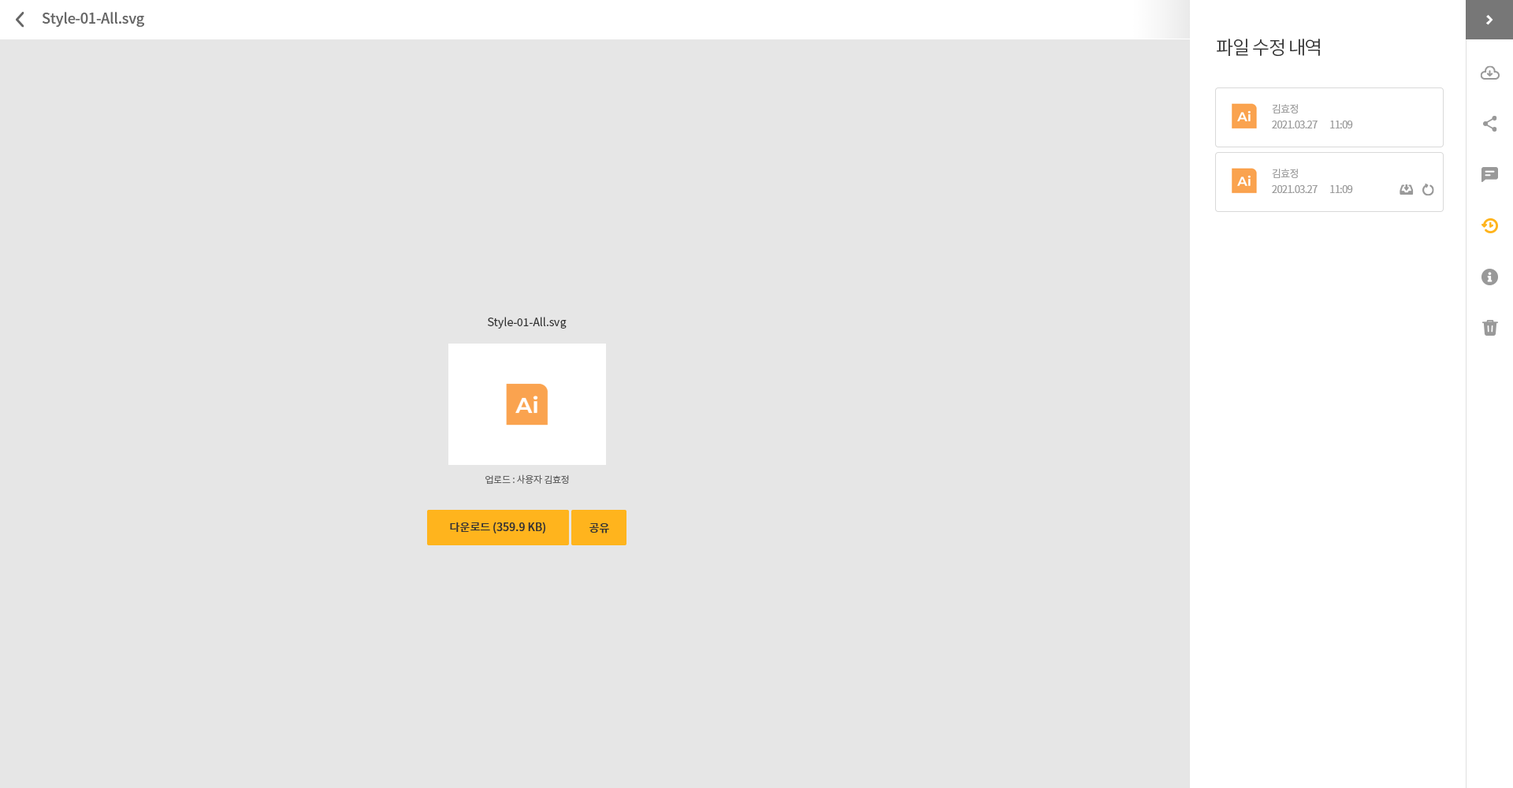
<style>
.page{position:relative;width:1513px;height:788px;background:#e6e6e6}
.page>*{position:absolute;margin:0}
.t1{font:14.2px "NotoSansCJKkr-Medium";letter-spacing:-0.01em;color:#666666}
.t2{font:18.9px "NotoSansCJKkr-DemiLight";letter-spacing:-0.05em;color:#333333}
.t3{font:10.2px/15.8px "NotoSansCJKkr-DemiLight";letter-spacing:-0.05em;color:#999999}
.t4{font:11px "NotoSansCJKkr-Regular";color:#333333}
.t5{font:9.5px "NotoSansCJKkr-Regular";letter-spacing:-0.025em;color:#666666}
.t6{font:11px "NotoSansCJKkr-Medium";color:#333333}
</style>
<div class="page">
<p class="t1" style="left:43px;top:12px;width:101px;height:15px">Style-01-All.svg</p>
<p class="t2" style="left:1217px;top:39px;width:103px;height:17px">파일 수정 내역</p>
<p class="t3" style="left:1272px;top:104px;width:81px;height:24px">김효정<br>2021.03.27       11:09</p>
<p class="t3" style="left:1272px;top:169px;width:81px;height:24px">김효정<br>2021.03.27       11:09</p>
<p class="t4" style="left:488px;top:317px;width:79px;height:12px">Style-01-All.svg</p>
<p class="t5" style="left:485px;top:474px;width:84px;height:10px">업로드 : 사용자 김효정</p>
<p class="t6" style="left:450px;top:522px;width:95px;height:12px">다운로드 (359.9 KB)</p>
<p class="t6" style="left:589px;top:523px;width:20px;height:11px">공유</p>
</div>
